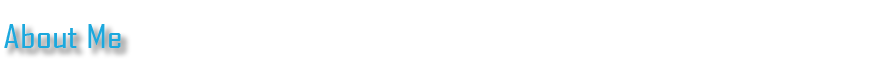
<style>
.page{position:relative;width:875px;height:74px;background:#ffffff}
.page>*{position:absolute;margin:0}
.t1{font:32px "AgencyFB-Reg";color:#1ca8dd;scale:1.3 1}
</style>
<div class="page">
<p class="t1" style="left:4px;top:24px;width:117px;height:24px">About Me</p>
</div>
